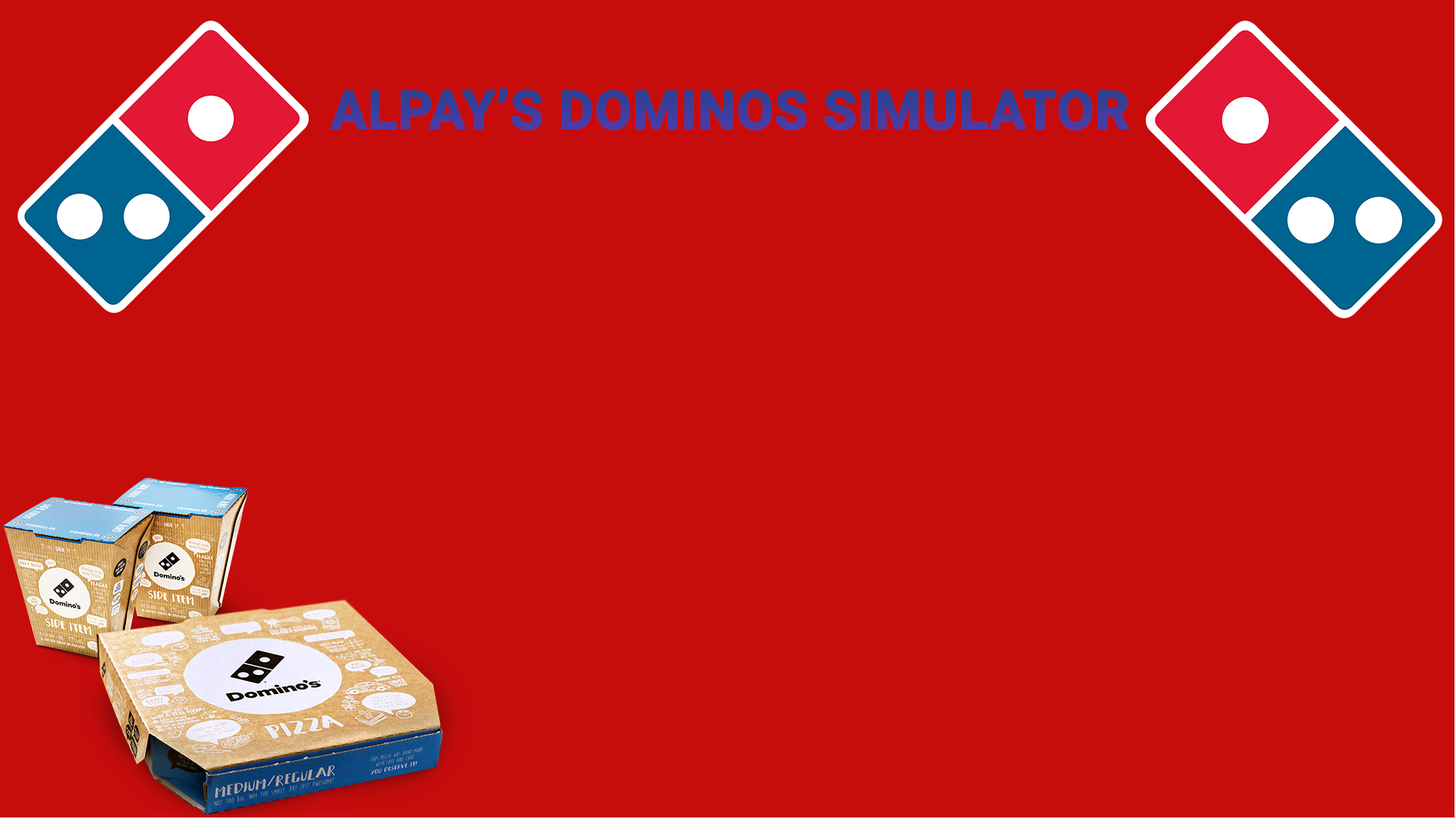
<style>
.page{position:relative;width:1456px;height:819px;background:#c70c0c}
.page>*{position:absolute;margin:0}
.t1{font:53.1px "Roboto-Bold";color:#3c3e9d;text-transform:uppercase;font-weight:bold}
</style>
<div class="page">
<p class="t1" style="left:330px;top:88px;width:799px;height:42px">ALPAY’S DOMINOS SIMULATOR</p>
</div>
